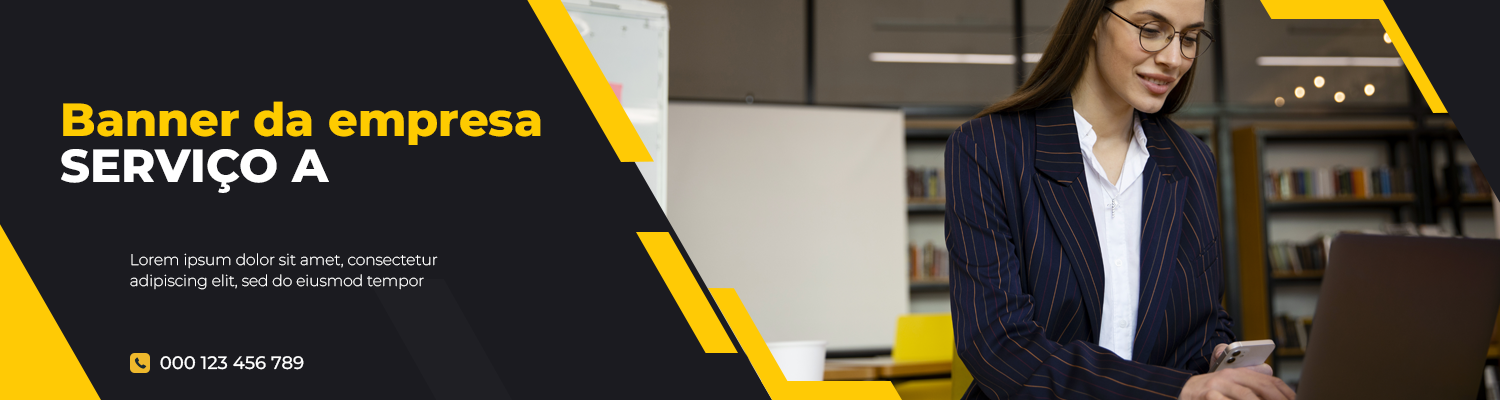
<style>
.page{position:relative;width:1500px;height:400px;background:#1b1b20}
.page>*{position:absolute;margin:0}
.t1{font:46.3px/46.3px "Montserrat-ExtraBold";color:#fecb00}
.t2{font:46.3px/46.3px "Montserrat-ExtraBold";color:#ffffff}
.t3{font:15.4px/21px "Montserrat-ExtraLight";color:#ffffff}
.t4{font:18px "Montserrat-Medium";color:#ffffff}
</style>
<div class="page">
<p class="t1" style="left:61px;top:101px;width:480px;height:92px">Banner da empresa<br><span class="t2">SERVIÇO A</span></p>
<p class="t3" style="left:130px;top:253px;width:308px;height:37px">Lorem ipsum dolor sit amet, consectetur adipiscing elit, sed do eiusmod tempor</p>
<p class="t4" style="left:160px;top:356px;width:144px;height:14px">000 123 456 789</p>
</div>
